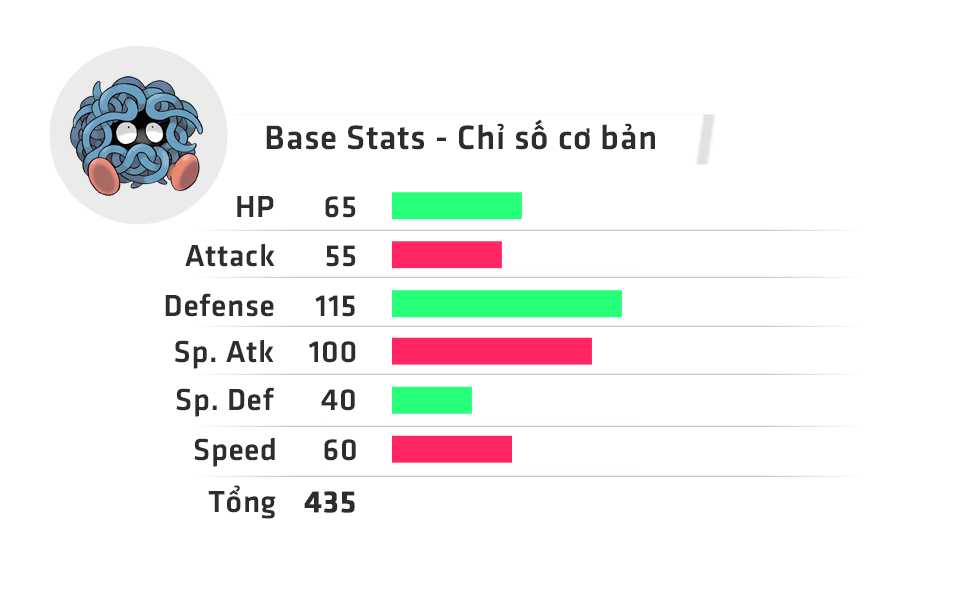
<style>
.page{position:relative;width:971px;height:593px;background:#ffffff}
.page>*{position:absolute;margin:0}
.t1{font:35px "UTM-Facebook-K&T";letter-spacing:0.02em;color:#2d2d2d}
.t2{font:31.6px "UTM-Facebook-K&T";letter-spacing:0.02em;color:#2d2d2d}
.t3{font:31.6px "UTM-Facebook-K&T";letter-spacing:0.02em;color:#2d2d2d;font-weight:bold}
</style>
<div class="page">
<p class="t1" style="left:266px;top:119px;width:389px;height:31px">Base Stats - Chỉ số cơ bản</p>
<p class="t2" style="left:237px;top:196px;width:37px;height:21px">HP</p>
<p class="t2" style="left:325px;top:196px;width:31px;height:22px">65</p>
<p class="t2" style="left:185px;top:243px;width:90px;height:24px">Attack</p>
<p class="t2" style="left:326px;top:245px;width:30px;height:22px">55</p>
<p class="t2" style="left:165px;top:293px;width:109px;height:24px">Defense</p>
<p class="t2" style="left:315px;top:295px;width:40px;height:22px">115</p>
<p class="t2" style="left:175px;top:339px;width:99px;height:30px">Sp. Atk</p>
<p class="t2" style="left:309px;top:341px;width:47px;height:22px">100</p>
<p class="t2" style="left:176px;top:387px;width:98px;height:30px">Sp. Def</p>
<p class="t2" style="left:321px;top:389px;width:34px;height:22px">40</p>
<p class="t2" style="left:194px;top:437px;width:81px;height:30px">Speed</p>
<p class="t2" style="left:324px;top:439px;width:32px;height:22px">60</p>
<p class="t2" style="left:208px;top:485px;width:68px;height:34px">Tổng</p>
<p class="t3" style="left:304px;top:491px;width:51px;height:22px">435</p>
</div>
